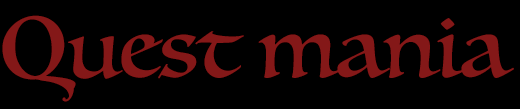
<style>
.page{position:relative;width:520px;height:109px;background:#000000}
.page>*{position:absolute;margin:0}
.t1{font:85px "Luminari-Regular";color:#841818}
</style>
<div class="page">
<p class="t1" style="left:2px;top:15px;width:512px;height:87px">Quest mania</p>
</div>
